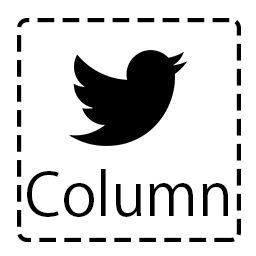
<style>
.page{position:relative;width:256px;height:256px;background:#ffffff}
.page>*{position:absolute;margin:0}
.t1{font:58.3px "KozGoPr6N-Regular";color:#000000}
</style>
<div class="page">
<p class="t1" style="left:27px;top:169px;width:201px;height:48px">Column</p>
</div>
